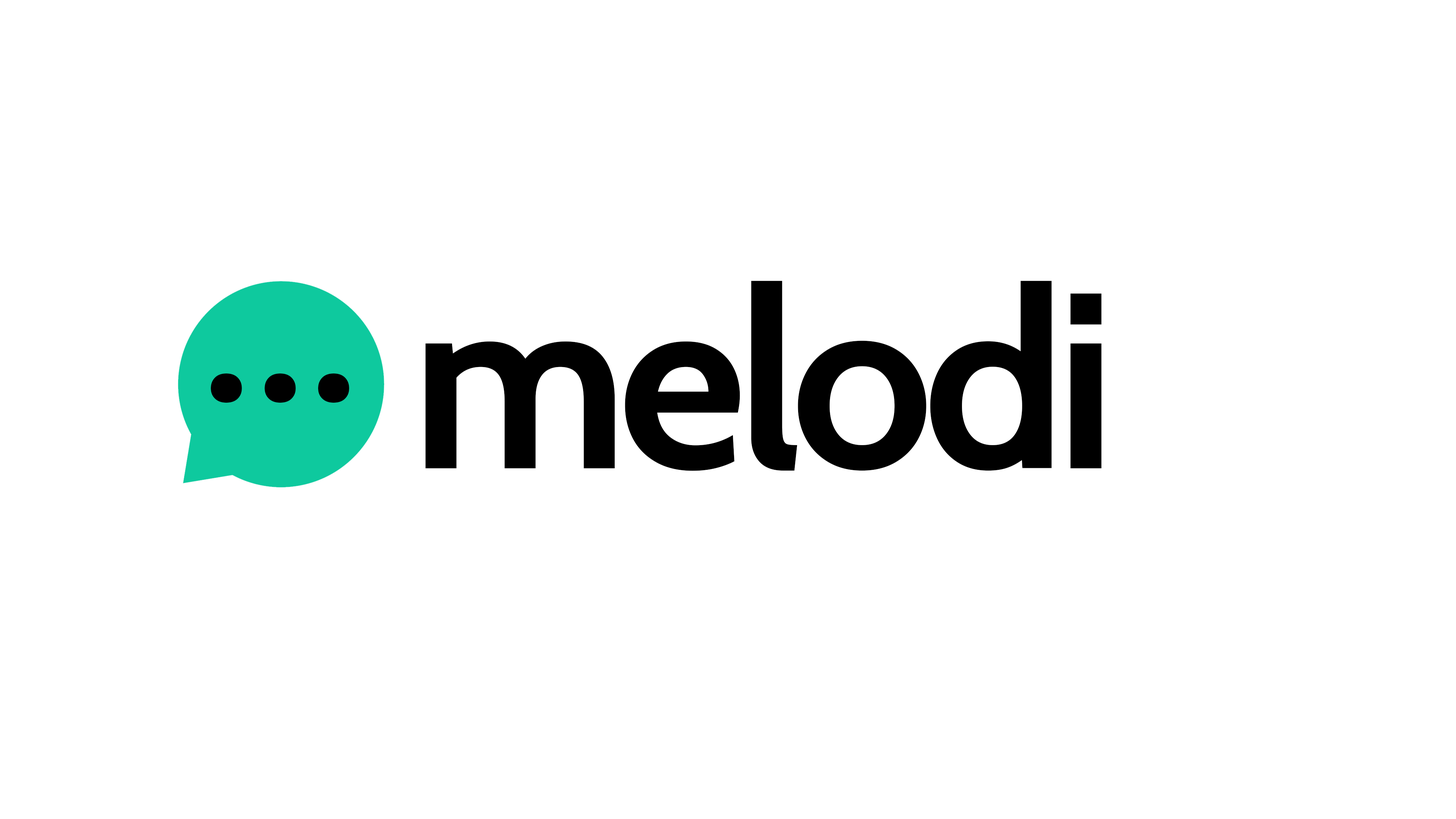
<style>
.page{position:relative;width:1456px;height:819px;background:#ffffff}
.page>*{position:absolute;margin:0}
.t1{font:249.6px "Cabin-Bold";letter-spacing:-0.04em;color:#000000}
.t2{font:224.3px "Roboto-Medium";letter-spacing:-0.04em;color:#000000}
</style>
<div class="page">
<p class="t1" style="left:425px;top:281px;width:676px;height:190px">melodi</p>
<p class="t2" style="left:211px;top:373px;width:138px;height:30px">...</p>
</div>
